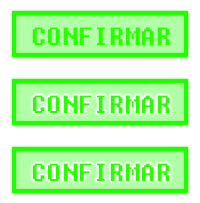
<style>
.page{position:relative;width:200px;height:203px;background:#ffffff}
.page>*{position:absolute;margin:0}
.t1{font:25px "Fixedsys";color:#2aff00}
</style>
<div class="page">
<p class="t1" style="left:32px;top:27px;width:138px;height:18px">CONFIRMAR</p>
<p class="t1" style="left:32px;top:95px;width:138px;height:18px">CONFIRMAR</p>
<p class="t1" style="left:32px;top:163px;width:138px;height:18px">CONFIRMAR</p>
</div>
